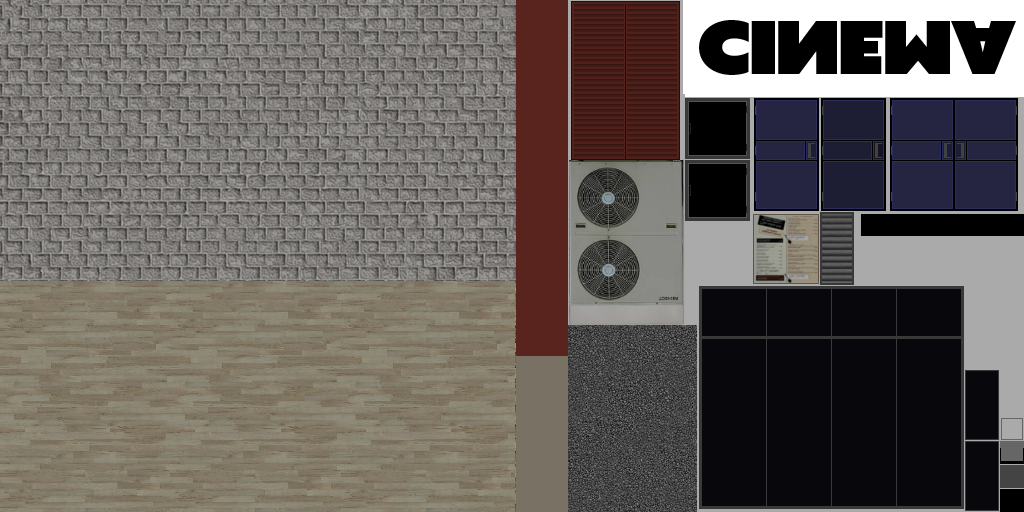
<style>
.page{position:relative;width:1024px;height:512px}
.page>*{position:absolute;margin:0}
.t1{font:73.1px "AzoSansUber-Regular";letter-spacing:-0.04em;color:#000000;scale:1.06 1}
</style>
<div class="page">
<p class="t1" style="left:699px;top:20px;width:317px;height:55px">CINEMA</p>
</div>
